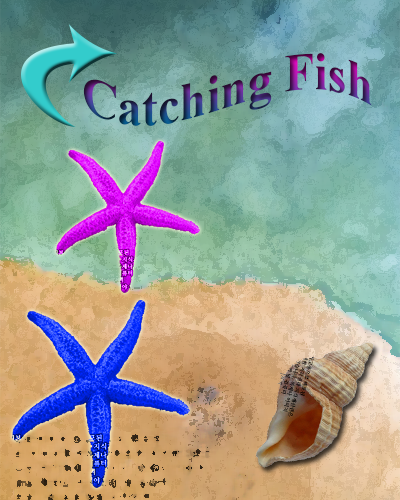
<style>
.page{position:relative;width:400px;height:500px}
.page>*{position:absolute;margin:0}
.t1{font:53.8px "TimesNewRomanPS-BoldMT";scale:0.91 1}
</style>
<div class="page">
<p class="t1" style="left:83px;top:53px;width:289px;height:73px">Catching Fish</p>
</div>
